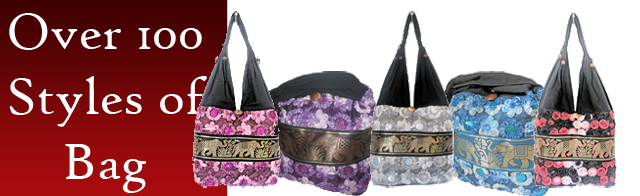
<style>
.page{position:relative;width:640px;height:196px;background:#ffffff}
.page>*{position:absolute;margin:0}
.t1{font:53.9px "HighTowerText-Reg";color:#ffffff}
</style>
<div class="page">
<p class="t1" style="left:9px;top:13px;width:198px;height:180px;text-align:center">Over 100<br>Styles of Bag</p>
</div>
